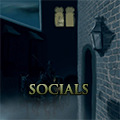
<style>
.page{position:relative;width:120px;height:120px}
.page>*{position:absolute;margin:0}
.t1{font:13px "TrajanPro-Bold"}
</style>
<div class="page">
<p class="t1" style="left:29px;top:84px;width:59px;height:11px">SOCIALS</p>
</div>
